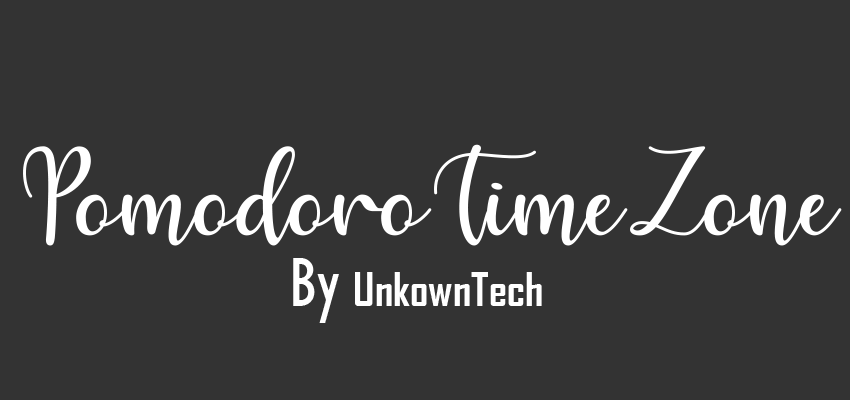
<style>
.page{position:relative;width:850px;height:400px;background:#333333}
.page>*{position:absolute;margin:0}
.t1{font:121px "HelloRegular";color:#ffffff}
.t2{font:45px "AgencyFB-Bold";color:#ffffff}
.t3{font:72px "GillSansMT-Condensed";color:#ffffff}
</style>
<div class="page">
<p class="t1" style="left:23px;top:144px;width:819px;height:102px">PomodoroTimeZone</p>
<p class="t2" style="left:293px;top:258px;width:249px;height:65px"><span class="t3">By </span>UnkownTech</p>
</div>
